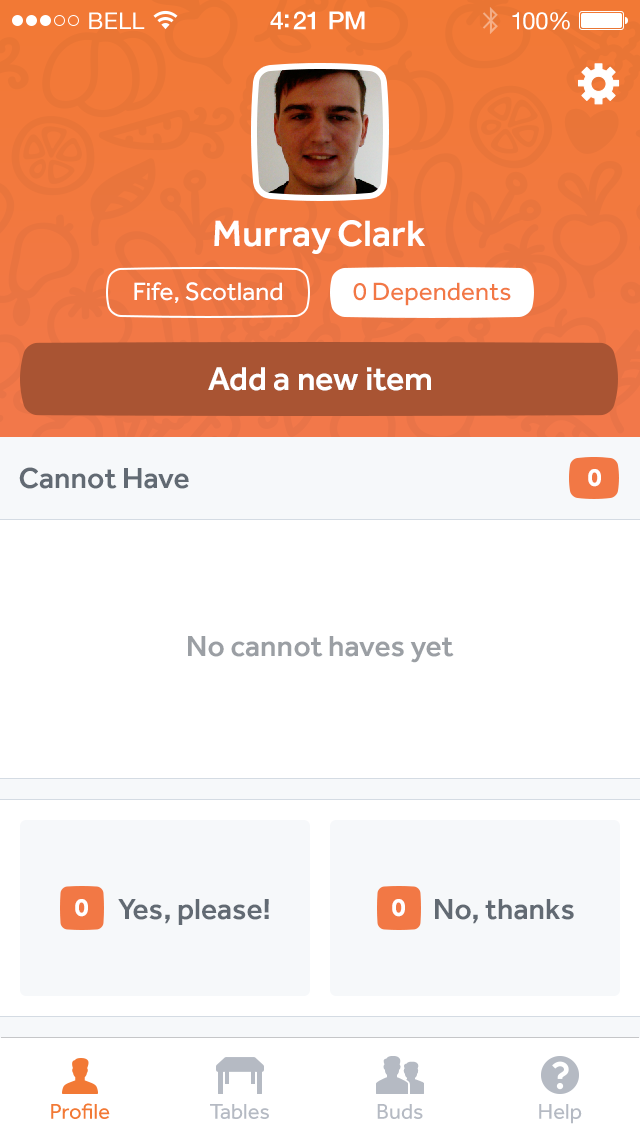
<style>
.page{position:relative;width:640px;height:1136px;background:#ffffff}
.page>*{position:absolute;margin:0}
.t1{font:23px "HelveticaNeue";letter-spacing:0.02em;color:#ffffff}
.t2{font:25px "HelveticaNeue-Medium";letter-spacing:-0.02em;color:#ffffff}
.t3{font:24px "HelveticaNeue";letter-spacing:-0.02em;color:#ffffff}
.t4{font:38px "Effra-Medium";color:#ffffff}
.t5{font:26px "Effra-Regular";color:#ffffff}
.t6{font:26px "Effra-Regular";color:#f27845}
.t7{font:34px "Effra-Medium";color:#ffffff}
.t8{font:30px "Effra-Medium";color:#626a73}
.t9{font:26px "Effra-Bold";color:#ffffff}
.t10{font:30px "Effra-Medium";color:#9b9fa4}
.t11{font:22px "Effra-Regular";color:#f27935}
.t12{font:22px "Effra-Regular";color:#b5bac3}
</style>
<div class="page">
<p class="t1" style="left:89px;top:12px;width:56px;height:17px">BELL</p>
<p class="t2" style="left:270px;top:11px;width:95px;height:19px">4:21 PM</p>
<p class="t3" style="left:512px;top:12px;width:58px;height:18px">100%</p>
<p class="t4" style="left:214px;top:220px;width:211px;height:34px">Murray Clark</p>
<p class="t5" style="left:134px;top:282px;width:148px;height:21px">Fife, Scotland</p>
<p class="t6" style="left:353px;top:282px;width:158px;height:24px">0 Dependents</p>
<p class="t7" style="left:208px;top:367px;width:223px;height:24px">Add a new item</p>
<p class="t8" style="left:19px;top:467px;width:170px;height:22px">Cannot Have</p>
<p class="t9" style="left:588px;top:469px;width:13px;height:18px">0</p>
<p class="t10" style="left:188px;top:636px;width:266px;height:27px">No cannot haves yet</p>
<p class="t9" style="left:75px;top:899px;width:13px;height:18px">0</p>
<p class="t8" style="left:118px;top:899px;width:151px;height:26px">Yes, please!</p>
<p class="t9" style="left:392px;top:899px;width:13px;height:18px">0</p>
<p class="t8" style="left:435px;top:899px;width:139px;height:25px">No, thanks</p>
<p class="t11" style="left:51px;top:1103px;width:59px;height:16px">Profile</p>
<p class="t12" style="left:210px;top:1104px;width:59px;height:15px">Tables</p>
<p class="t12" style="left:377px;top:1104px;width:46px;height:15px">Buds</p>
<p class="t12" style="left:539px;top:1104px;width:43px;height:20px">Help</p>
</div>
